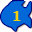
<style>
.page{position:relative;width:32px;height:32px;background:#0068d7}
.page>*{position:absolute;margin:0}
.t1{font:14px "Verdana-Bold";letter-spacing:0.14em;color:#f0ce11}
</style>
<div class="page">
<p class="t1" style="left:13px;top:11px;width:8px;height:10px">1</p>
</div>
